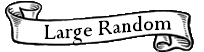
<style>
.page{position:relative;width:204px;height:52px;background:#ffffff}
.page>*{position:absolute;margin:0}
.t1{font:24px "Perpetua";color:#000000}
</style>
<div class="page">
<p class="t1" style="left:44px;top:15px;width:128px;height:31px">Large Random</p>
</div>
